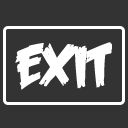
<style>
.page{position:relative;width:128px;height:128px;background:#333333}
.page>*{position:absolute;margin:0}
.t1{font:60px "FeastofFleshBB";color:#ffffff;font-weight:bold}
</style>
<div class="page">
<p class="t1" style="left:15px;top:42px;width:97px;height:48px">Exit</p>
</div>
